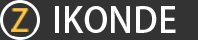
<style>
.page{position:relative;width:198px;height:40px;background:#333333}
.page>*{position:absolute;margin:0}
.t1{font:35.1px "AdobeHeitiStd-Regular";color:#ffffff}
</style>
<div class="page">
<p class="t1" style="left:55px;top:6px;width:121px;height:27px">IKONDE</p>
</div>
